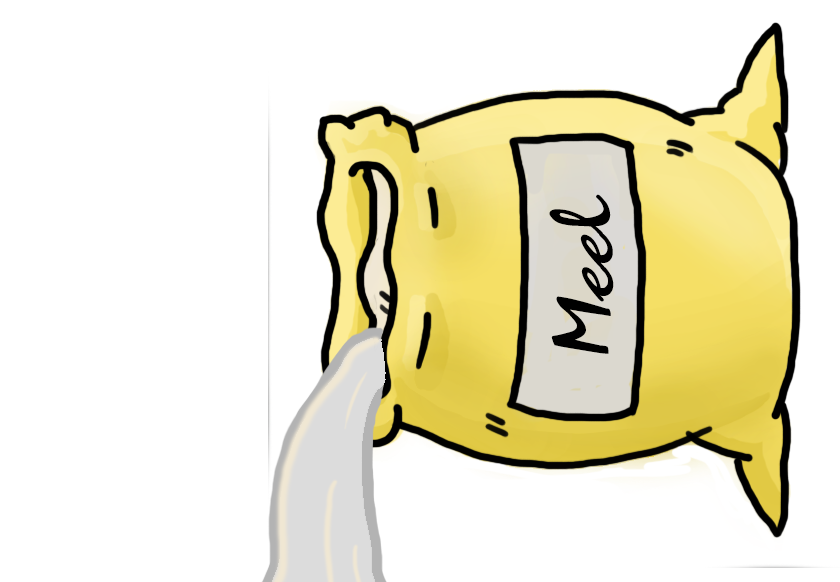
<style>
.page{position:relative;width:840px;height:582px;background:#ffffff}
.page>*{position:absolute;margin:0}
.t1{font:79.2px "Borealis";color:#000000}
</style>
<div class="page">
<p class="t1" style="left:549px;top:194px;width:65px;height:160px;rotate:-90deg">Meel</p>
</div>
